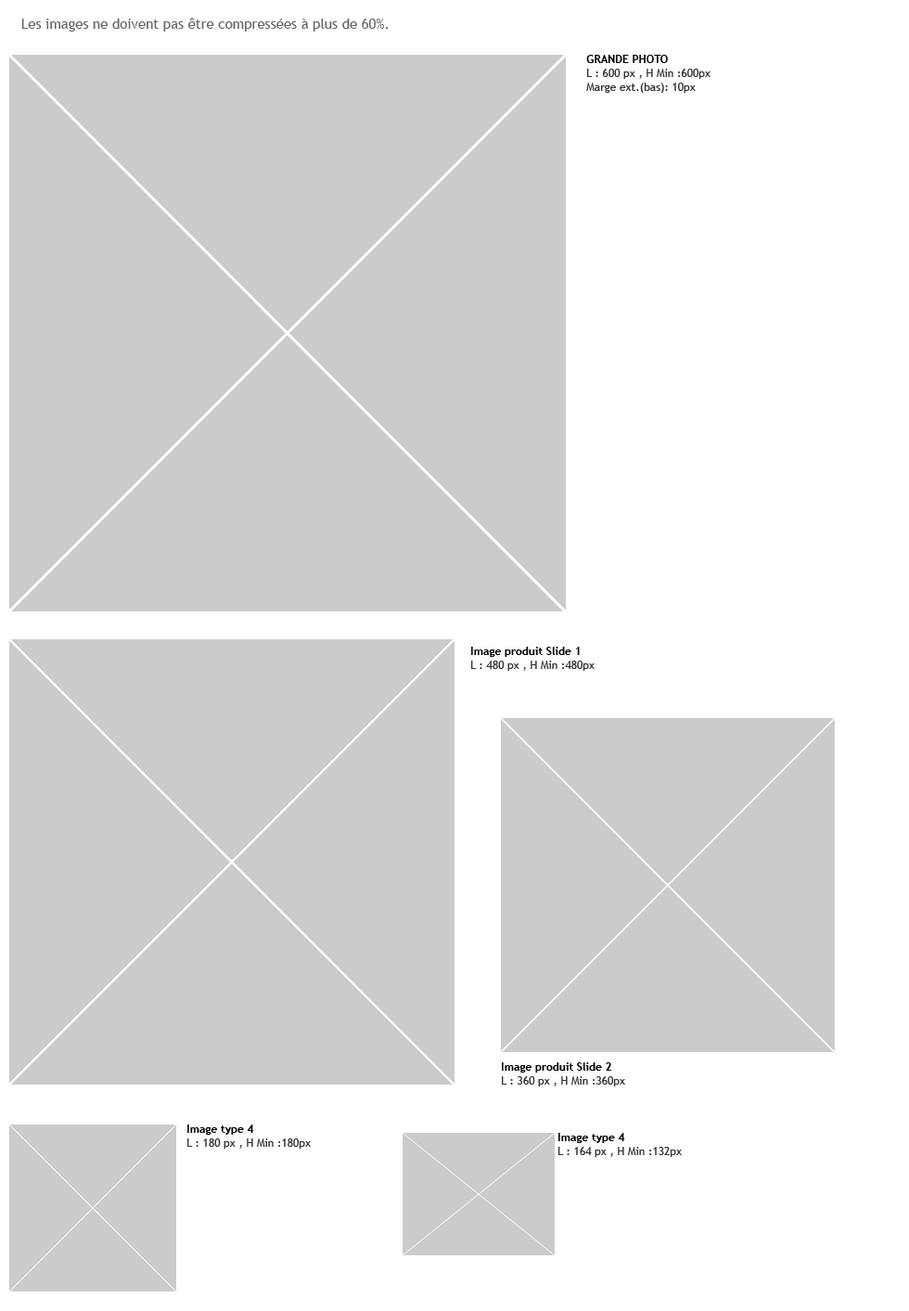
<style>
.page{position:relative;width:909px;height:1311px;background:#cbcbcb}
.page>*{position:absolute;margin:0}
.t1{font:13.9px "TrebuchetMS";color:#666666}
.t2{font:11.1px/13.9px "TrebuchetMS";color:#333333}
.t3{font:11.1px/26.9px "TrebuchetMS-Bold";color:#000000}
</style>
<div class="page">
<p class="t1" style="left:21px;top:18px;width:368px;height:14px">Les images ne doivent pas être compressées à plus de 60%.</p>
<p class="t2" style="left:586px;top:55px;width:125px;height:38px"><span class="t3">GRANDE PHOTO<br></span>L : 600 px , H Min :600px<br>Marge ext.(bas): 10px</p>
<p class="t2" style="left:471px;top:647px;width:124px;height:24px"><span class="t3">Image produit Slide 1<br></span>L : 480 px , H Min :480px</p>
<p class="t2" style="left:502px;top:1063px;width:123px;height:24px"><span class="t3">Image produit Slide 2<br></span>L : 360 px , H Min :360px</p>
<p class="t2" style="left:187px;top:1125px;width:124px;height:24px"><span class="t3">Image type 4<br></span>L : 180 px , H Min :180px</p>
<p class="t2" style="left:559px;top:1133px;width:123px;height:24px"><span class="t3">Image type 4<br></span>L : 164 px , H Min :132px</p>
</div>
